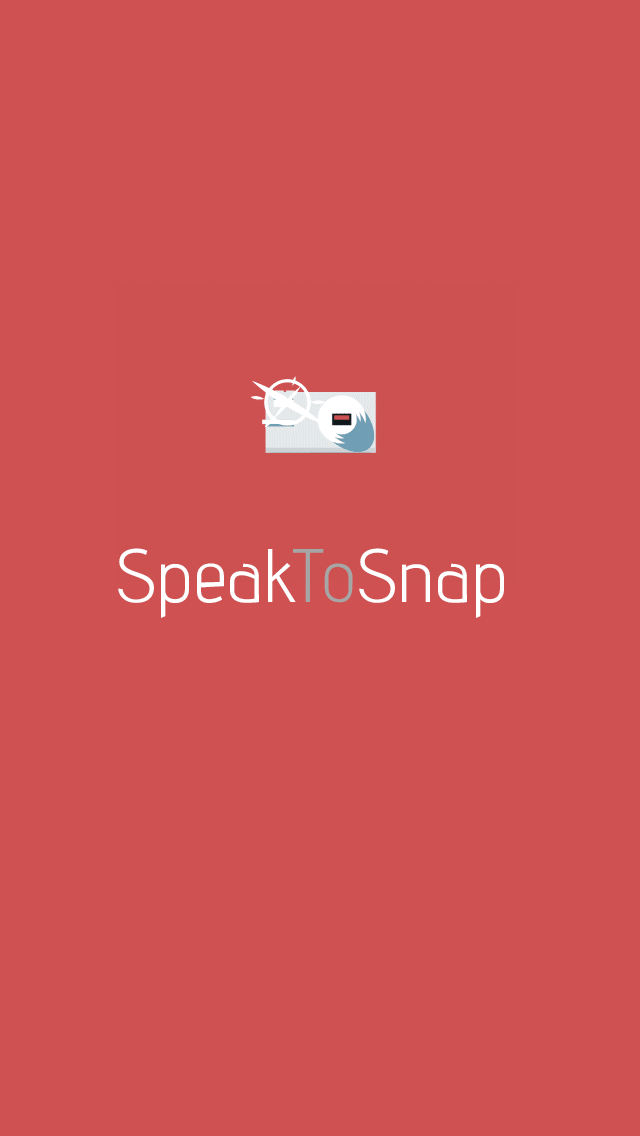
<style>
.page{position:relative;width:640px;height:1136px;background:#cf5151}
.page>*{position:absolute;margin:0}
.t1{font:75px "advent-Regular";color:#ffffff}
.t2{font:75px "advent-Regular";color:#a6a6a6}
</style>
<div class="page">
<p class="t1" style="left:118px;top:548px;width:386px;height:70px">Speak<span class="t2">To</span>Snap</p>
</div>
